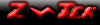
<style>
.page{position:relative;width:100px;height:25px;background:#000000}
.page>*{position:absolute;margin:0}
.t1{font:16px "ZeroVelocity(BRK)"}
</style>
<div class="page">
<p class="t1" style="left:7px;top:2px;width:90px;height:18px">Z    Tek</p>
</div>
